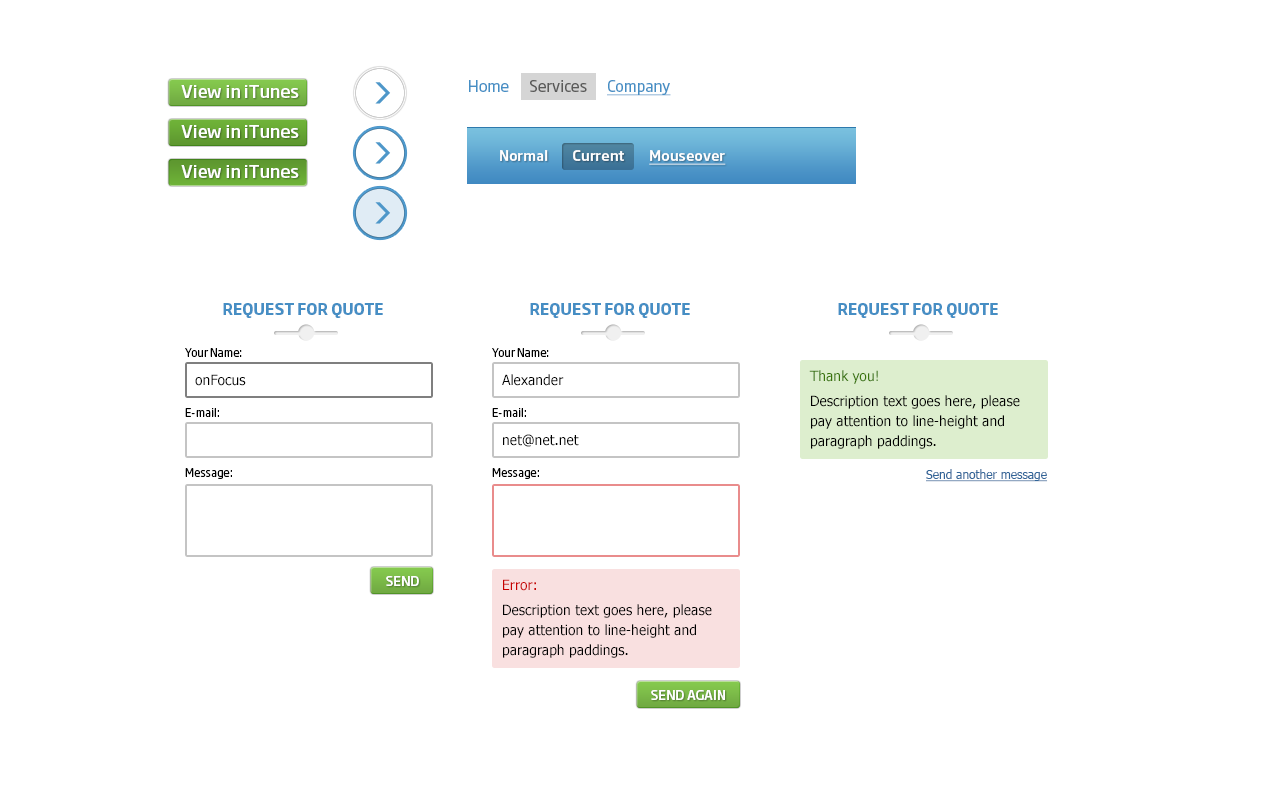
<style>
.page{position:relative;width:1280px;height:812px;background:#ffffff}
.page>*{position:absolute;margin:0}
.t1{font:16.6px "SohoGothicPro-Medium";color:#ffffff}
.t2{font:15px "SohoGothicPro-Regular";color:#5a5a59}
.t3{font:15px "SohoGothicPro-Regular";color:#468fc5}
.t4{font:15px "SohoGothicPro-Regular";color:#468fc5;text-decoration:underline}
.t5{font:14px "SohoGothicPro-Medium";color:#ffffff}
.t6{font:14px "SohoGothicPro-Medium";color:#ffffff;text-decoration:underline}
.t7{font:15px "SohoGothicPro-Bold";color:#468ec4;text-transform:uppercase}
.t8{font:11px/60px "SohoGothicPro-Regular";color:#000000}
.t9{font:14px "Tahoma";color:#000000}
.t10{font:14px/60px "Tahoma";color:#000000}
.t11{font:14px/20px "Tahoma";color:#000000}
.t12{font:14px/20px "Tahoma";color:#3a750b}
.t13{font:12px "Tahoma";color:#336699;text-decoration:underline}
.t14{font:12.6px "SohoGothicPro-Medium";color:#ffffff}
.t15{font:14px/20px "Tahoma";color:#c80000}
</style>
<div class="page">
<p class="t1" style="left:181px;top:85px;width:118px;height:13px">View in iTunes</p>
<p class="t2" style="left:469px;top:80px;width:202px;height:16px"><span class="t3">Home</span>       Services       <span class="t4">Company</span></p>
<p class="t1" style="left:181px;top:125px;width:118px;height:13px">View in iTunes</p>
<p class="t5" style="left:500px;top:150px;width:226px;height:15px">Normal         Current         <span class="t6">Mouseover</span></p>
<p class="t1" style="left:181px;top:165px;width:118px;height:13px">View in iTunes</p>
<p class="t7" style="left:223px;top:303px;width:160px;height:15px">Request for quote</p>
<p class="t7" style="left:530px;top:303px;width:160px;height:15px">Request for quote</p>
<p class="t7" style="left:838px;top:303px;width:160px;height:15px">Request for quote</p>
<p class="t8" style="left:185px;top:348px;width:57px;height:131px">Your Name:<br>E-mail:<br>Message:</p>
<p class="t8" style="left:492px;top:348px;width:57px;height:131px">Your Name:<br>E-mail:<br>Message:</p>
<p class="t9" style="left:195px;top:374px;width:51px;height:12px">onFocus</p>
<p class="t10" style="left:502px;top:374px;width:77px;height:73px">Alexander<br>net@net.net</p>
<p class="t11" style="left:809px;top:370px;width:211px;height:79px"><span class="t12">Thank you!<br></span>Description text goes here, please pay attention to line-height and paragraph paddings.</p>
<p class="t13" style="left:926px;top:469px;width:122px;height:13px">Send another message</p>
<p class="t14" style="left:386px;top:576px;width:33px;height:10px">SEND</p>
<p class="t11" style="left:503px;top:579px;width:209px;height:79px"><span class="t15">Error:<br></span>Description text goes here, please pay attention to line-height and paragraph paddings.</p>
<p class="t14" style="left:651px;top:690px;width:74px;height:10px">SEND AGAIN</p>
</div>
